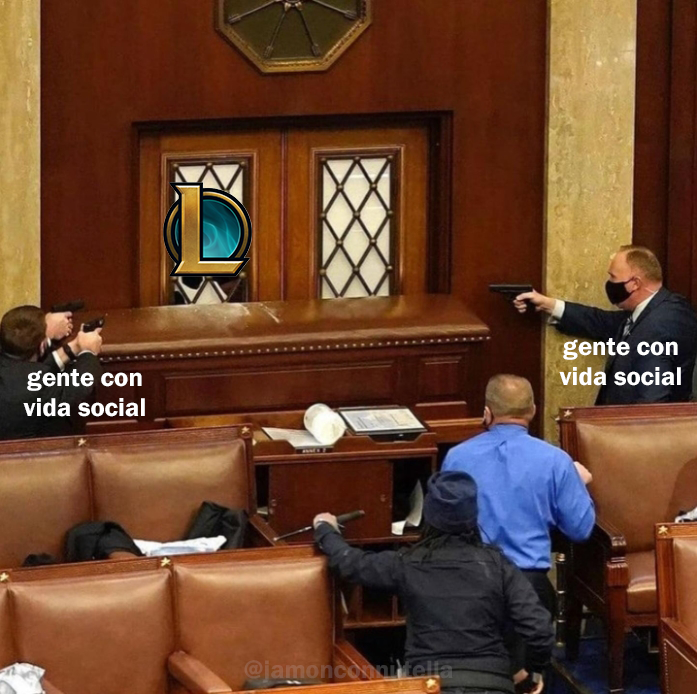
<style>
.page{position:relative;width:697px;height:694px}
.page>*{position:absolute;margin:0}
.t1{font:26.5px "FranklinGothic-Demi";color:#ffffff}
.t2{font:25.9px "FranklinGothic-Demi"}
</style>
<div class="page">
<p class="t1" style="left:559px;top:338px;width:122px;height:48px;text-align:center">gente con<br>vida social</p>
<p class="t1" style="left:23px;top:369px;width:122px;height:48px;text-align:center">gente con<br>vida social</p>
<p class="t2" style="left:244px;top:660px;width:209px;height:23px">@jamonconnutella</p>
</div>
